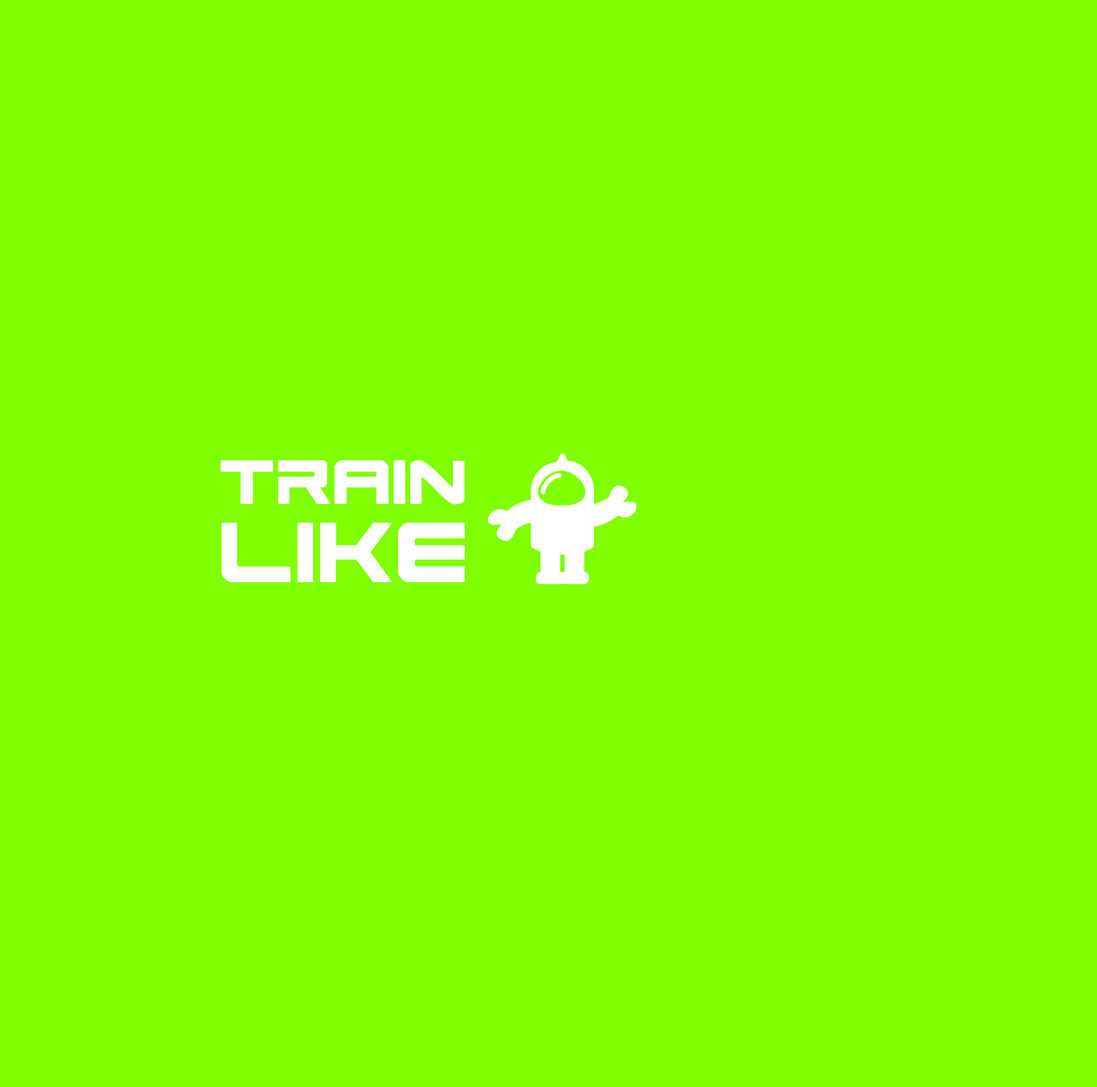
<style>
.page{position:relative;width:1097px;height:1087px;background:#80ff00}
.page>*{position:absolute;margin:0}
.t1{font:86.7px/78.2px "SpaceRanger";color:#ffffff}
.t2{font:118px/78.2px "SpaceRanger";color:#ffffff}
</style>
<div class="page">
<p class="t1" style="left:220px;top:460px;width:245px;height:122px">train <br><span class="t2">like</span></p>
</div>
